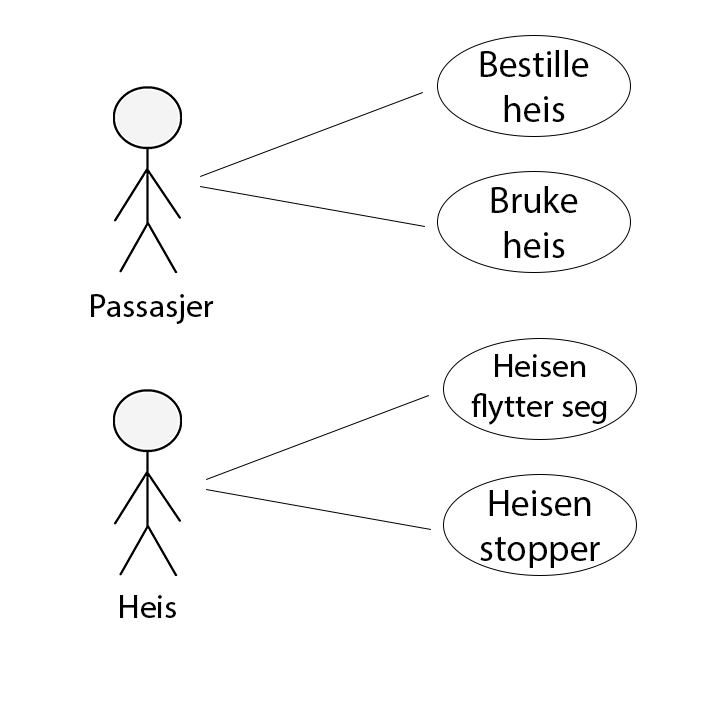
<style>
.page{position:relative;width:720px;height:720px;background:#ffffff}
.page>*{position:absolute;margin:0}
.t1{font:37.5px "MyriadHebrew-Regular";color:#000000}
.t2{font:33.3px "MyriadHebrew-Regular";color:#000000}
</style>
<div class="page">
<p class="t1" style="left:480px;top:50px;width:109px;height:72px;text-align:center">Bestille <br>heis</p>
<p class="t1" style="left:491px;top:186px;width:87px;height:72px;text-align:center">Bruke<br>heis</p>
<p class="t2" style="left:91px;top:294px;width:123px;height:30px">Passasjer</p>
<p class="t2" style="left:471px;top:354px;width:136px;height:71px;text-align:center">Heisen<br>flytter seg</p>
<p class="t1" style="left:480px;top:490px;width:120px;height:78px;text-align:center">Heisen<br>stopper</p>
<p class="t2" style="left:120px;top:595px;width:56px;height:23px">Heis</p>
</div>
